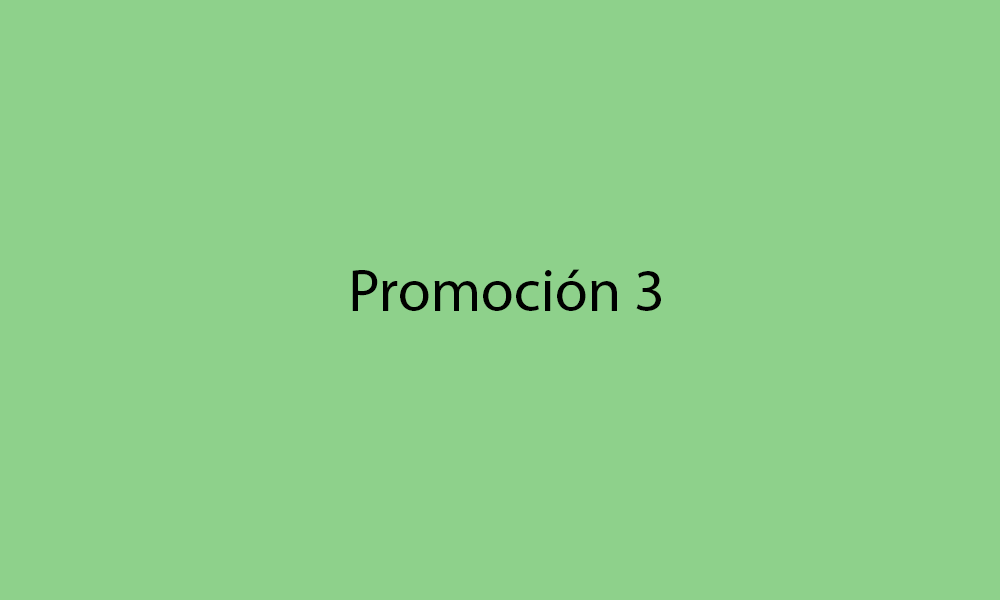
<style>
.page{position:relative;width:1000px;height:600px;background:#8ed18b}
.page>*{position:absolute;margin:0}
.t1{font:60px "MyriadHebrew-Regular";color:#000000}
</style>
<div class="page">
<p class="t1" style="left:352px;top:269px;width:309px;height:42px">Promoción 3</p>
</div>
